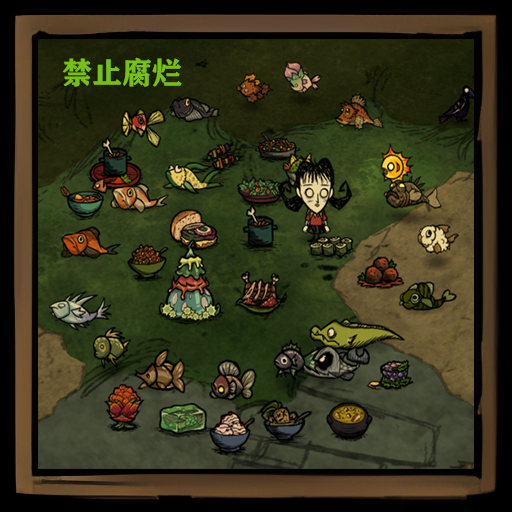
<style>
.page{position:relative;width:512px;height:512px}
.page>*{position:absolute;margin:0}
.t1{font:30px "FZCHSJW--GB1-0";color:#78c014}
</style>
<div class="page">
<p class="t1" style="left:62px;top:57px;width:120px;height:30px">禁止腐烂</p>
</div>
